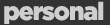
<style>
.page{position:relative;width:110px;height:25px;background:#333333}
.page>*{position:absolute;margin:0}
.t1{font:25px "GothamBlack";letter-spacing:-0.05em;color:#cfcfcf}
</style>
<div class="page">
<p class="t1" style="left:4px;top:1px;width:100px;height:23px">personal</p>
</div>
